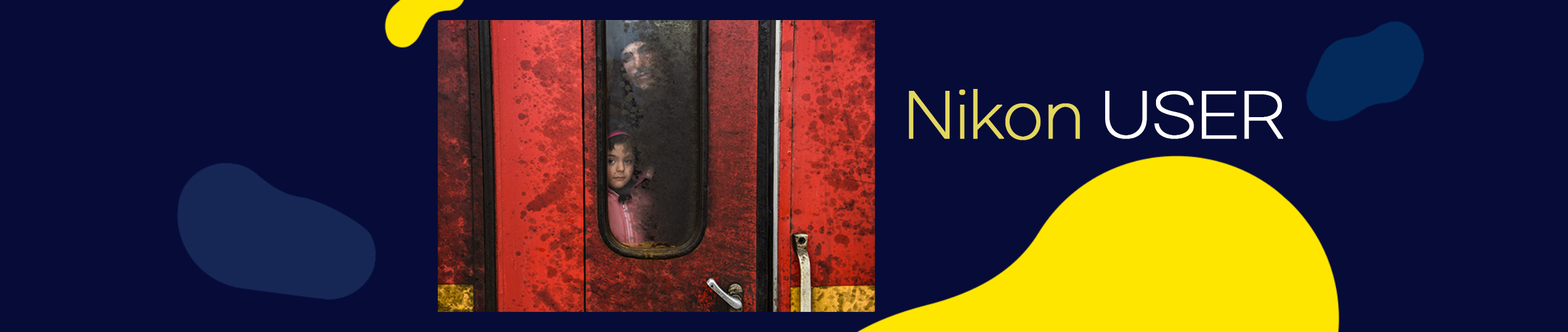
<style>
.page{position:relative;width:1568px;height:332px;background:#070b38}
.page>*{position:absolute;margin:0}
.t1{font:60.2px "GmarketSansTTFLight";letter-spacing:-0.02em;color:#e3d75f;font-weight:bold}
.t2{font:60.2px "GmarketSansTTFLight";letter-spacing:-0.02em;color:#ffffff;font-weight:bold}
</style>
<div class="page">
<p class="t1" style="left:909px;top:89px;width:374px;height:51px">Nikon <span class="t2">USER</span></p>
</div>
